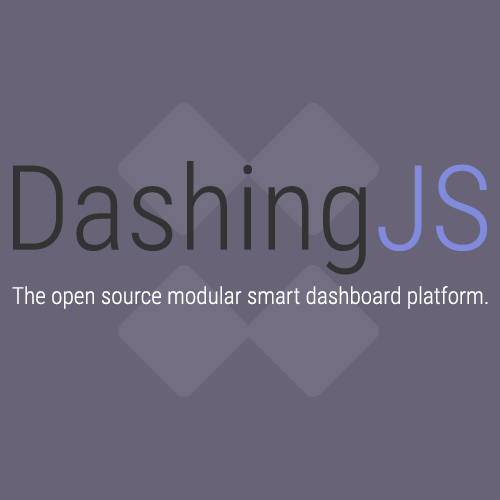
<style>
.page{position:relative;width:500px;height:500px;background:#686377}
.page>*{position:absolute;margin:0}
.t1{font:117.9px "RobotoCondensed-Light";color:#333333}
.t2{font:117.9px "RobotoCondensed-Light";color:#818bdb}
.t3{font:39.9px "RobotoCondensed-Light";color:#ffffff}
</style>
<div class="page">
<p class="t1" style="left:13px;top:161px;width:474px;height:114px">Dashing<span class="t2">JS</span></p>
<p class="t3" style="left:12px;top:286px;width:476px;height:23px">The open source modular smart dashboard platform.</p>
</div>
